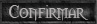
<style>
.page{position:relative;width:97px;height:24px}
.page>*{position:absolute;margin:0}
.t1{font:17.1px "Morpheus";color:#b3b0b0}
</style>
<div class="page">
<p class="t1" style="left:9px;top:5px;width:80px;height:16px">Confirmar</p>
</div>
